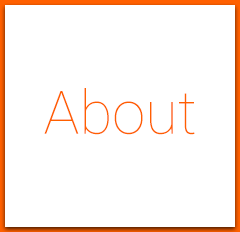
<style>
.page{position:relative;width:240px;height:232px;background:#ffffff}
.page>*{position:absolute;margin:0}
.t1{font:60px "Roboto-Thin";color:#ff6000}
</style>
<div class="page">
<p class="t1" style="left:44px;top:88px;width:151px;height:47px">About</p>
</div>
